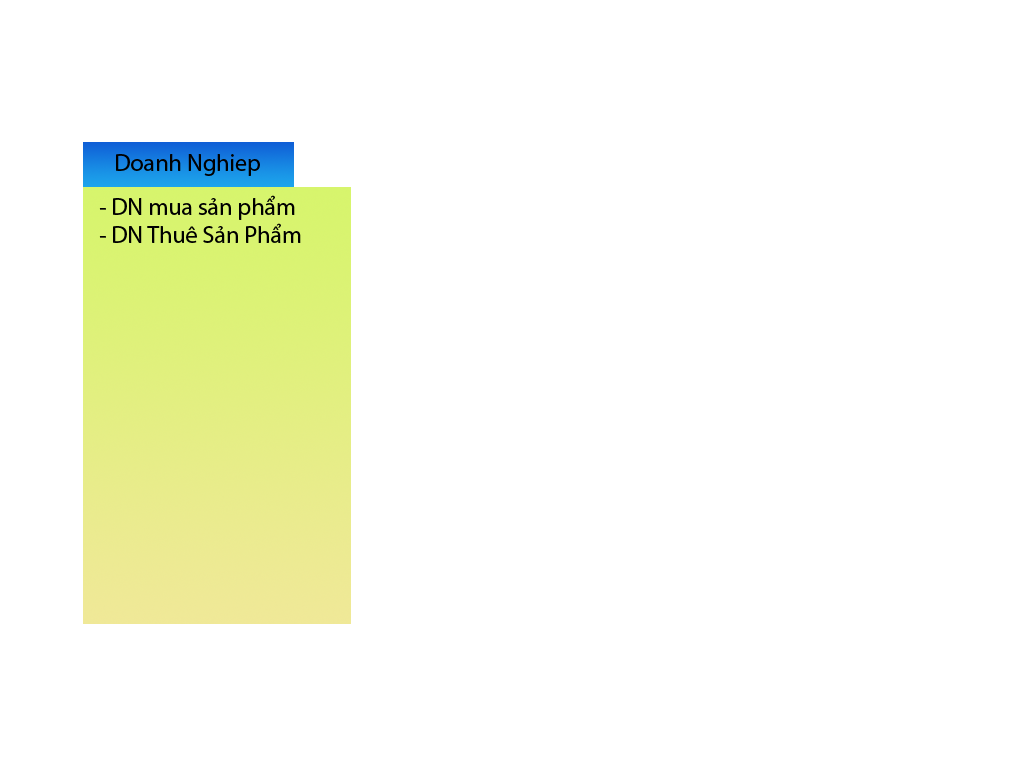
<style>
.page{position:relative;width:1024px;height:768px;background:#ffffff}
.page>*{position:absolute;margin:0}
.t1{font:24px "MyriadPro-Regular";color:#000000}
</style>
<div class="page">
<p class="t1" style="left:116px;top:154px;width:144px;height:22px">Doanh Nghiep</p>
<p class="t1" style="left:99px;top:195px;width:202px;height:48px">- DN mua sản phẩm<br>- DN Thuê Sản Phẩm</p>
</div>
